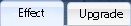
<style>
.page{position:relative;width:131px;height:26px;background:#eaf3ff}
.page>*{position:absolute;margin:0}
.t1{font:12px "MyriadPro-Regular";color:#000000}
</style>
<div class="page">
<p class="t1" style="left:19px;top:8px;width:25px;height:9px">Effect</p>
<p class="t1" style="left:80px;top:9px;width:43px;height:11px">Upgrade</p>
</div>
